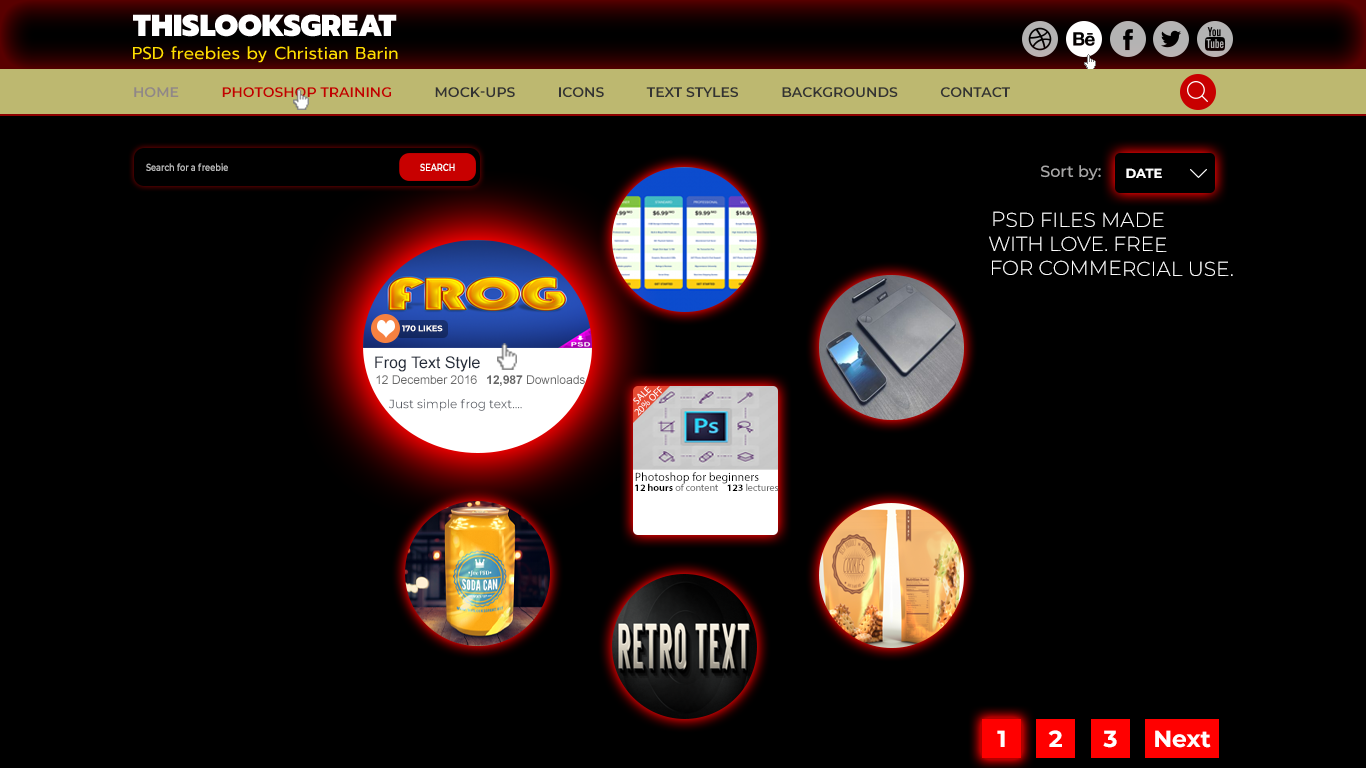
<style>
.page{position:relative;width:1366px;height:768px;background:#000000}
.page>*{position:absolute;margin:0}
.t1{font:30px "Prompt-Black";color:#ffffff;text-transform:uppercase}
.t2{font:17px "Prompt-Regular";letter-spacing:0.018em;color:#ffde00}
.t3{font:14px "Montserrat-SemiBold";color:#333333;text-transform:uppercase}
.t4{font:14px "Montserrat-SemiBold";color:#908787;text-transform:uppercase}
.t5{font:14px "Montserrat-SemiBold";color:#c10000;text-transform:uppercase}
.t6{font:10.1px "Montserrat-SemiBold";color:#b8b8b8;scale:0.81 1}
.t7{font:10.1px "Montserrat-SemiBold";color:#ffffff;text-transform:uppercase;scale:0.81 1}
.t8{font:16px "Montserrat-Medium";color:#a9a8a8}
.t9{font:13px "Montserrat-Bold";color:#ffffff;text-transform:uppercase}
.t10{font:20.2px "Montserrat-Light";color:#fefefe;text-transform:uppercase}
.t11{font:8.2px "Montserrat-Bold";color:#fffefe}
.t12{font:16px "ArialMT";color:#242c3a}
.t13{font:12px "ArialMT";color:#686868}
.t14{font:12px "Arial-BoldMT";color:#686868}
.t15{font:10px "MyriadPro-Regular";color:#ffffff;text-transform:uppercase}
.t16{font:12px "Montserrat-Regular";color:#545861}
.t17{font:12px "MyriadPro-Regular";color:#010101}
.t18{font:10px "MyriadPro-Regular";color:#656565}
.t19{font:10px "MyriadPro-Bold";color:#010101}
.t20{font:23.4px "Montserrat-Bold";color:#fffefe}
.t21{font:23.4px "Montserrat-Bold";color:#fffdfd}
</style>
<div class="page">
<p class="t1" style="left:133px;top:14px;width:264px;height:23px">thislooksgreat</p>
<p class="t2" style="left:133px;top:46px;width:265px;height:17px">PSD freebies by Christian Barin</p>
<p class="t3" style="left:134px;top:87px;width:876px;height:11px"><span class="t4">Home           </span><span class="t5">Photoshop Training</span>           Mock-ups           Icons           Text Styles           Backgrounds           Contact</p>
<p class="t6" style="left:146px;top:163px;width:82px;height:8px">Search for a freebie</p>
<p class="t7" style="left:420px;top:163px;width:35px;height:8px">Search</p>
<p class="t8" style="left:1041px;top:165px;width:60px;height:15px">Sort by:</p>
<p class="t9" style="left:1126px;top:168px;width:36px;height:10px">date</p>
<p class="t10" style="left:989px;top:211px;width:244px;height:65px;text-align:center">psd files made<br>with love. Free<br>             for commercial use.</p>
<p class="t11" style="left:402px;top:325px;width:41px;height:7px">170 LIKES</p>
<p class="t12" style="left:375px;top:356px;width:105px;height:16px">Frog Text Style</p>
<p class="t13" style="left:376px;top:375px;width:101px;height:9px">12 December 2016</p>
<p class="t13" style="left:487px;top:375px;width:98px;height:11px"><span class="t14">12,987</span> Downloads</p>
<p class="t15" style="left:633px;top:386px;width:19px;height:19px;rotate:-45deg">sale</p>
<p class="t15" style="left:634px;top:386px;width:28px;height:30px;rotate:-45deg">20% OFF</p>
<p class="t16" style="left:389px;top:399px;width:133px;height:12px">Just simple frog text....</p>
<p class="t17" style="left:635px;top:472px;width:124px;height:12px">Photoshop for beginners</p>
<p class="t18" style="left:635px;top:483px;width:83px;height:8px"><span class="t19">12 hours </span>of content</p>
<p class="t18" style="left:727px;top:483px;width:52px;height:8px"><span class="t19">123 </span>lectures</p>
<p class="t20" style="left:997px;top:730px;width:8px;height:17px">1</p>
<p class="t20" style="left:1048px;top:730px;width:14px;height:17px">2</p>
<p class="t20" style="left:1103px;top:730px;width:14px;height:18px">3</p>
<p class="t21" style="left:1155px;top:730px;width:56px;height:18px">Next</p>
</div>
